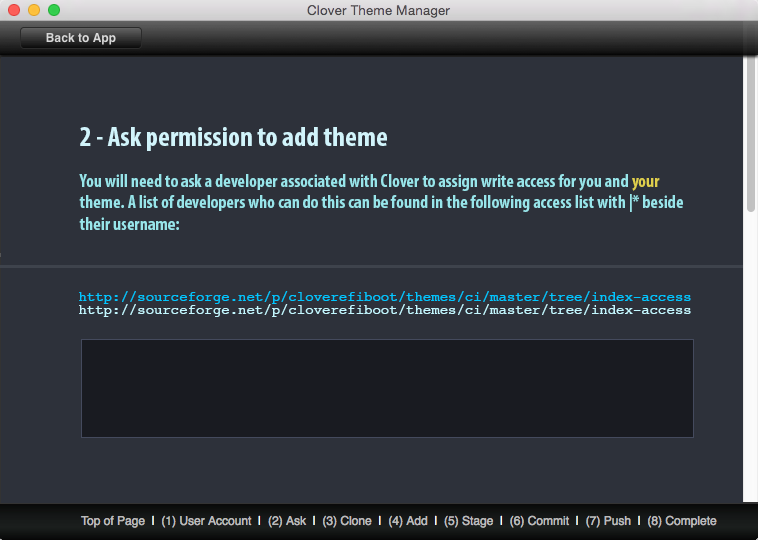
<style>
.page{position:relative;width:758px;height:540px;background:#2d313a}
.page>*{position:absolute;margin:0}
.t1{font:28px "MyriadPro-BoldCond";color:#d1f4fb}
.t2{font:18px "MyriadPro-BoldCond";color:#98e5ea}
.t3{font:18px "MyriadPro-BoldCond";color:#dfcf4c}
.t4{font:14px "Courier";color:#00c6ff}
.t5{font:14px "Courier";color:#c4f7ff}
</style>
<div class="page">
<p class="t1" style="left:80px;top:127px;width:307px;height:24px">2 - Ask permission to add theme</p>
<p class="t2" style="left:79px;top:174px;width:604px;height:56px">You will need to ask a developer associated with Clover to assign write access for you and <span class="t3">your<br></span>theme. A list of developers who can do this can be found in the following access list with |* beside<br>their username:</p>
<p class="t4" style="left:79px;top:291px;width:612px;height:13px">http://sourceforge.net/p/cloverefiboot/themes/ci/master/tree/index-access</p>
<p class="t5" style="left:79px;top:304px;width:612px;height:13px">http://sourceforge.net/p/cloverefiboot/themes/ci/master/tree/index-access</p>
</div>
